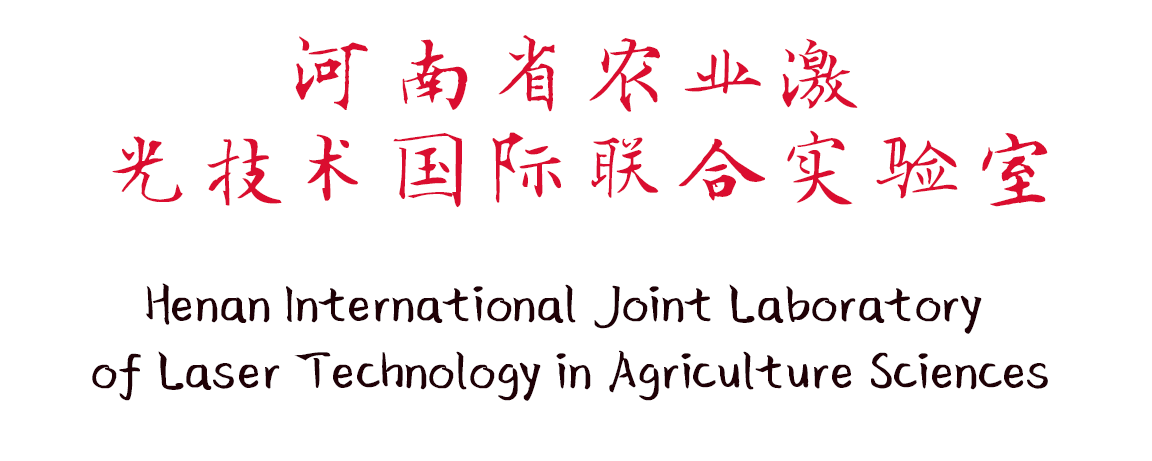
<style>
.page{position:relative;width:1152px;height:461px;background:#ffffff}
.page>*{position:absolute;margin:0}
.t1{font:79.9px "SentyWen";color:#da0d2f}
.t2{font:55.8px "SentyWen";color:#1f0106}
</style>
<div class="page">
<p class="t1" style="left:112px;top:35px;width:936px;height:173px;text-align:center">河南省农业激<br>光技术国际联合实验室</p>
<p class="t2" style="left:92px;top:283px;width:956px;height:118px;text-align:center">Henan International Joint Laboratory <br>of Laser Technology in Agriculture Sciences</p>
</div>
